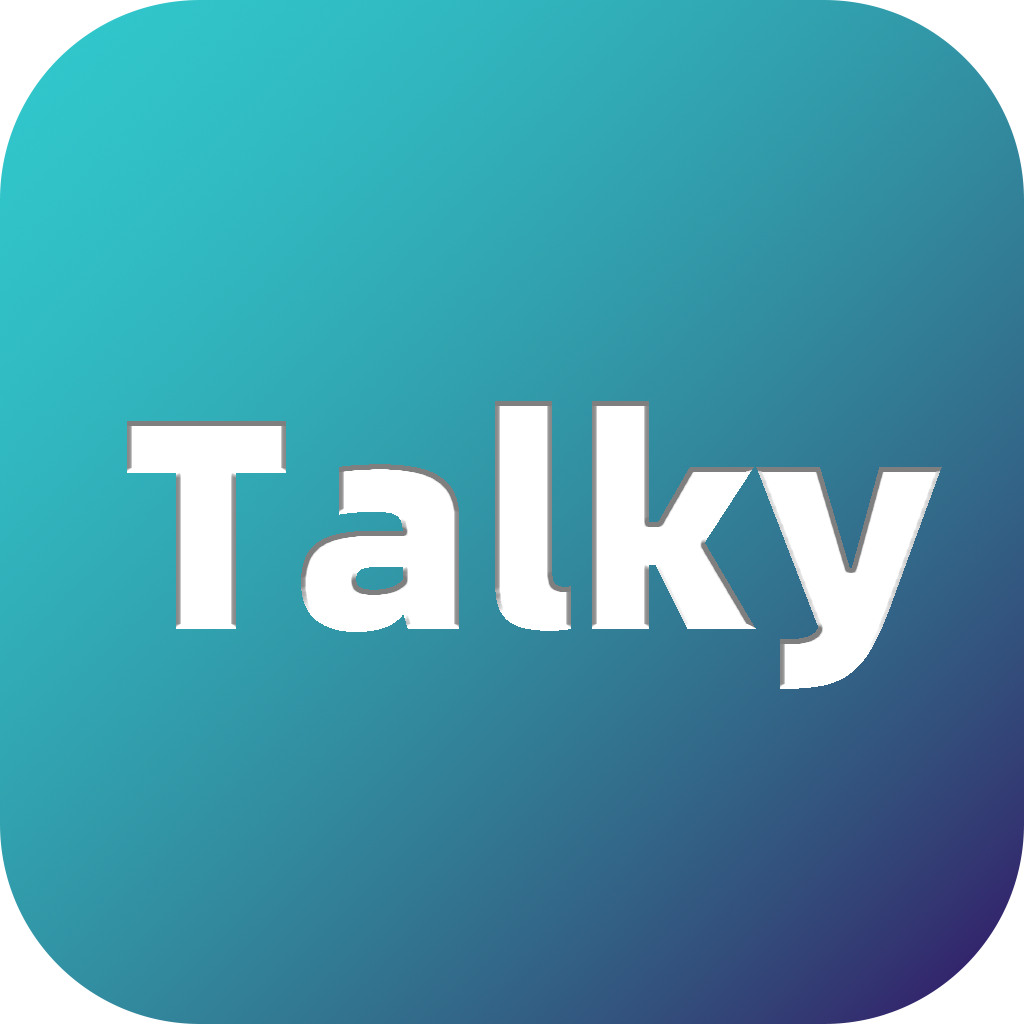
<style>
.page{position:relative;width:1024px;height:1024px}
.page>*{position:absolute;margin:0}
.t1{font:300px "AlibabaPuHuiTi_3_115_Black";color:#ffffff}
</style>
<div class="page">
<p class="t1" style="left:127px;top:401px;width:815px;height:288px">Talky</p>
</div>
